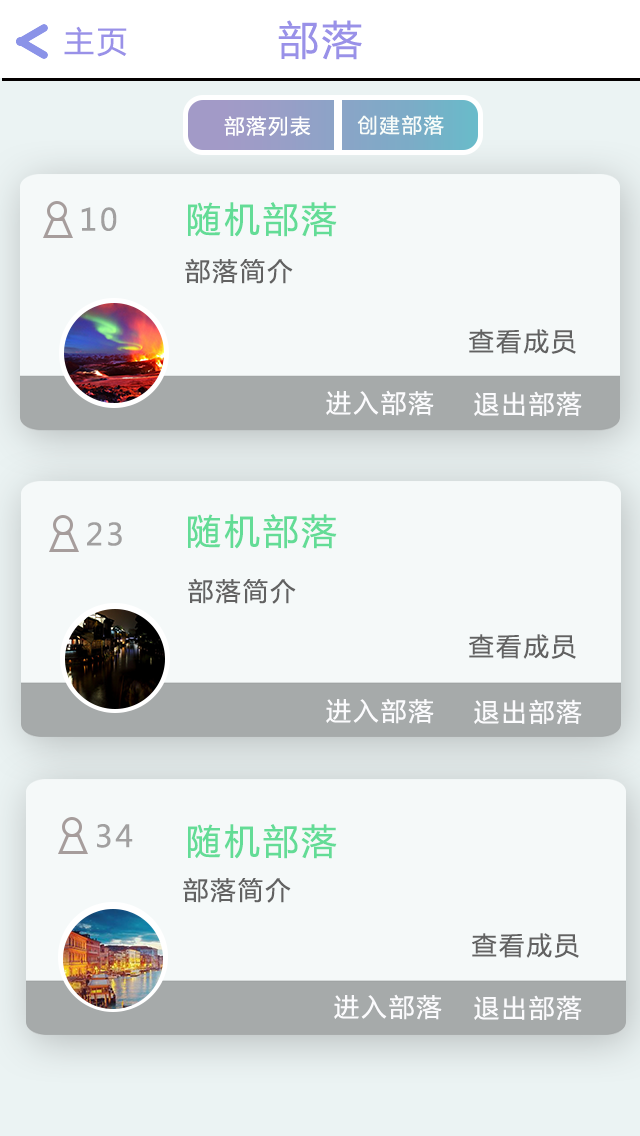
<style>
.page{position:relative;width:640px;height:1136px;background:#f5f9f9}
.page>*{position:absolute;margin:0}
.t1{font:30px "MicrosoftYaHei";letter-spacing:0.1em;color:#9991e8}
.t2{font:40px "MicrosoftYaHei";letter-spacing:0.1em;color:#9991e8}
.t3{font:20px "MicrosoftYaHei";letter-spacing:0.1em;color:#ffffff}
.t4{font:20px "MicrosoftYaHei";letter-spacing:0.1em;color:#f8fdfa}
.t5{font:30px "MicrosoftYaHei";letter-spacing:0.1em;color:#a1a0a0}
.t6{font:35px "MicrosoftYaHei";letter-spacing:0.1em;color:#63dc96}
.t7{font:25px "MicrosoftYaHei";letter-spacing:0.1em;color:#626262}
.t8{font:25px "MicrosoftYaHei";letter-spacing:0.1em;color:#fbfbfd}
</style>
<div class="page">
<p class="t1" style="left:64px;top:26px;width:63px;height:31px">主页</p>
<p class="t2" style="left:278px;top:20px;width:84px;height:40px">部落</p>
<p class="t3" style="left:224px;top:116px;width:87px;height:20px">部落列表</p>
<p class="t4" style="left:357px;top:115px;width:87px;height:20px">创建部落</p>
<p class="t5" style="left:81px;top:207px;width:36px;height:24px">10</p>
<p class="t6" style="left:188px;top:202px;width:149px;height:35px">随机部落</p>
<p class="t7" style="left:185px;top:258px;width:108px;height:26px">部落简介</p>
<p class="t7" style="left:469px;top:329px;width:107px;height:25px">查看成员</p>
<p class="t8" style="left:326px;top:390px;width:108px;height:26px">进入部落</p>
<p class="t8" style="left:474px;top:391px;width:108px;height:26px">退出部落</p>
<p class="t6" style="left:188px;top:514px;width:149px;height:35px">随机部落</p>
<p class="t5" style="left:87px;top:522px;width:35px;height:24px">23</p>
<p class="t7" style="left:188px;top:578px;width:108px;height:26px">部落简介</p>
<p class="t7" style="left:469px;top:634px;width:107px;height:25px">查看成员</p>
<p class="t8" style="left:326px;top:698px;width:108px;height:26px">进入部落</p>
<p class="t8" style="left:474px;top:699px;width:108px;height:26px">退出部落</p>
<p class="t5" style="left:97px;top:824px;width:36px;height:24px">34</p>
<p class="t6" style="left:188px;top:824px;width:149px;height:35px">随机部落</p>
<p class="t7" style="left:183px;top:877px;width:108px;height:26px">部落简介</p>
<p class="t7" style="left:472px;top:933px;width:107px;height:25px">查看成员</p>
<p class="t8" style="left:334px;top:994px;width:108px;height:26px">进入部落</p>
<p class="t8" style="left:474px;top:995px;width:108px;height:26px">退出部落</p>
</div>
